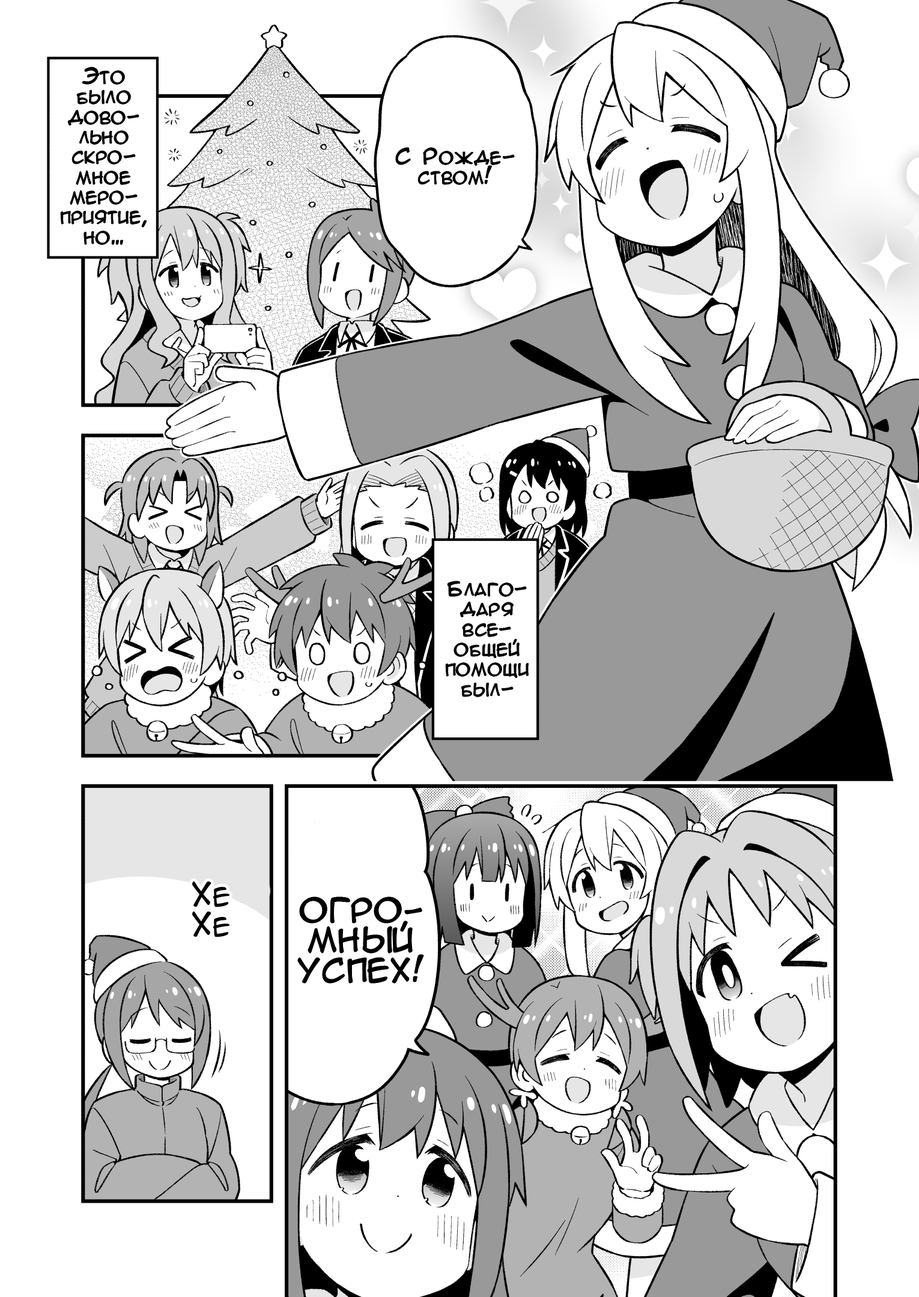
<style>
.page{position:relative;width:919px;height:1297px;background:#ffffff}
.page>*{position:absolute;margin:0}
.t1{font:20px/20px "AnimeAcev3";color:#000000}
.t2{font:30px/30px "AnimeAcev3";color:#000000}
</style>
<div class="page">
<p class="t1" style="left:61px;top:67px;width:86px;height:178px;text-align:center">Это<br>было<br>дово-<br>льно<br>скро-<br>мное<br>меро-<br>приятие,<br>но...</p>
<p class="t1" style="left:396px;top:148px;width:118px;height:37px;text-align:center">С Рожде-<br>ством!</p>
<p class="t1" style="left:446px;top:581px;width:83px;height:116px;text-align:center">Благо-<br>даря<br>все-<br>общей<br>помощи<br>был-</p>
<p class="t2" style="left:192px;top:882px;width:37px;height:56px;text-align:center">Хе<br>Хе</p>
<p class="t2" style="left:298px;top:897px;width:126px;height:86px;text-align:center">ОГРО-<br>МНЫЙ<br>УСПЕХ!</p>
</div>
